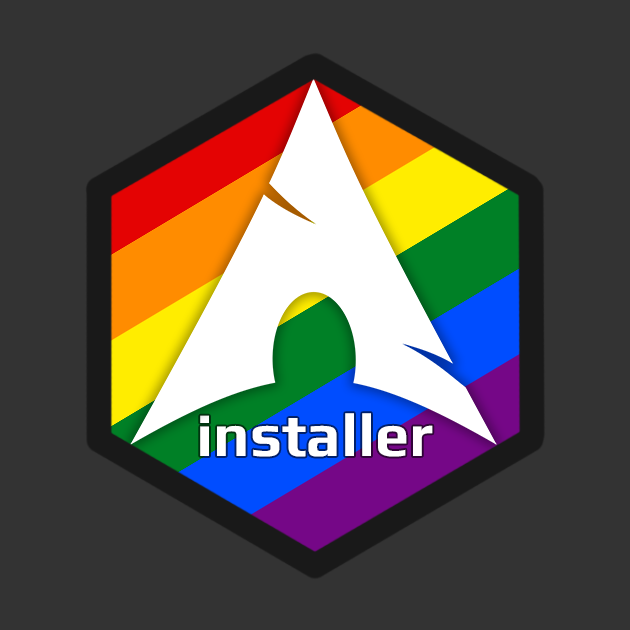
<style>
.page{position:relative;width:630px;height:630px;background:#333333}
.page>*{position:absolute;margin:0}
.t1{font:61px "Play-Bold";color:#ffffff}
</style>
<div class="page">
<p class="t1" style="left:200px;top:413px;width:233px;height:44px">installer</p>
</div>
